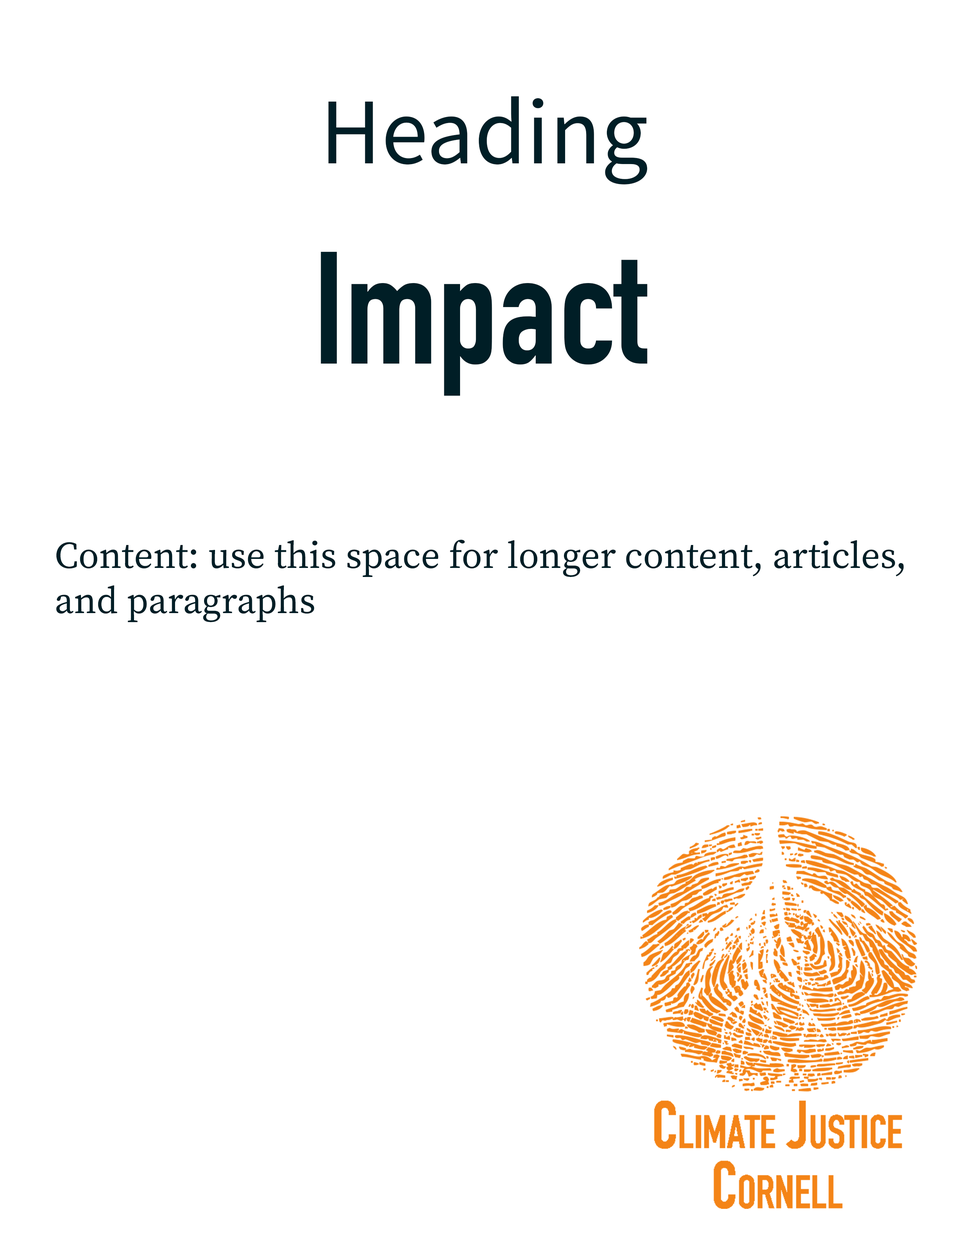
<style>
.page{position:relative;width:960px;height:1242px;background:#ffffff}
.page>*{position:absolute;margin:0}
.t1{font:94.1px "SourceSansRoman-Regular";color:#001e26}
.t2{font:156.8px "DINCondensed-Bold";color:#001e26}
.t3{font:37.6px "SourceSerifRoman-Regular";color:#001e26}
</style>
<div class="page">
<p class="t1" style="left:328px;top:96px;width:319px;height:88px">Heading</p>
<p class="t2" style="left:321px;top:252px;width:326px;height:144px">Impact</p>
<p class="t3" style="left:56px;top:540px;width:848px;height:82px">Content: use this space for longer content, articles,<br>and paragraphs</p>
</div>
